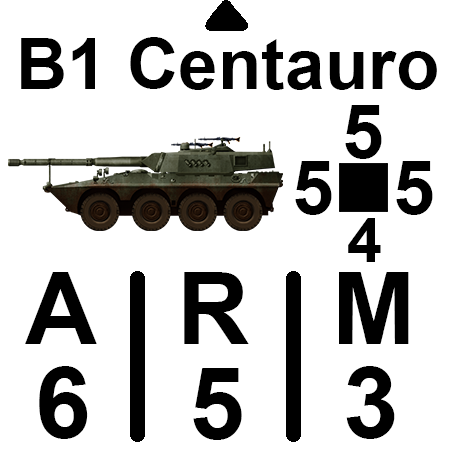
<style>
.page{position:relative;width:450px;height:450px;background:#ffffff}
.page>*{position:absolute;margin:0}
.t1{font:71.2px "Arial-BoldMT";color:#000000}
.t2{font:75px "Arial-BoldMT";color:#000000}
.t3{font:62.5px "Arial-BoldMT";color:#000000}
.t4{font:100px "Arial-BoldMT";color:#000000}
</style>
<div class="page">
<p class="t1" style="left:21px;top:37px;width:416px;height:53px">B1 Centauro</p>
<p class="t2" style="left:345px;top:105px;width:37px;height:54px">5</p>
<p class="t2" style="left:295px;top:161px;width:37px;height:54px">5</p>
<p class="t2" style="left:396px;top:161px;width:37px;height:54px">5</p>
<p class="t3" style="left:348px;top:218px;width:33px;height:44px">4</p>
<p class="t4" style="left:25px;top:272px;width:384px;height:72px">A   R   M</p>
<p class="t4" style="left:39px;top:366px;width:49px;height:73px">6</p>
<p class="t4" style="left:346px;top:366px;width:49px;height:73px">3</p>
<p class="t4" style="left:193px;top:368px;width:49px;height:72px">5</p>
</div>
